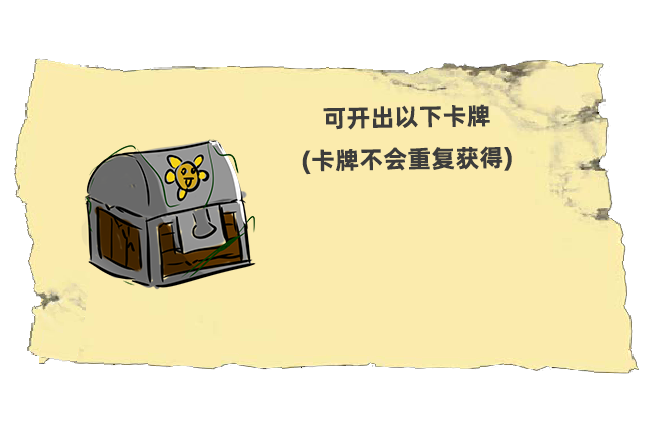
<style>
.page{position:relative;width:654px;height:427px;background:#fbebad}
.page>*{position:absolute;margin:0}
.t1{font:24.4px/42.1px "AlibabaPuHuiTiB";color:#3c3c3c}
</style>
<div class="page">
<p class="t1" style="left:302px;top:104px;width:210px;height:71px;text-align:center;rotate:-1deg">可开出以下卡牌<br>(卡牌不会重复获得)</p>
</div>
